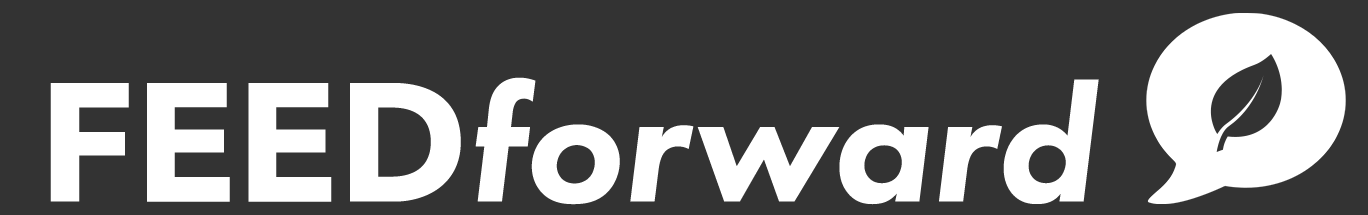
<style>
.page{position:relative;width:1368px;height:215px;background:#333333}
.page>*{position:absolute;margin:0}
.t1{font:167.3px "FuturaPT-HeavyObl";color:#ffffff}
.t2{font:167.3px "AvenirNextLTPro-Bold";color:#ffffff}
</style>
<div class="page">
<p class="t1" style="left:50px;top:77px;width:1049px;height:128px"><span class="t2">FEED</span>forward</p>
</div>
